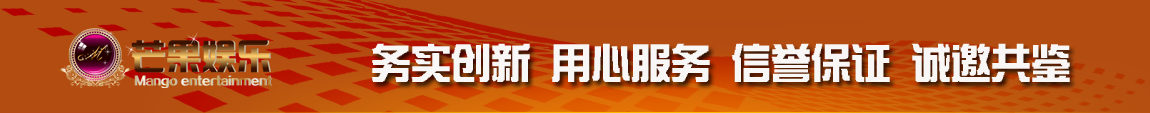
<style>
.page{position:relative;width:1150px;height:113px;background:#b34c11}
.page>*{position:absolute;margin:0}
.t1{font:40px "ÎÄ¶¦ÐÂÒÕÌå¼ò-Regular";color:#f9f6f6}
</style>
<div class="page">
<p class="t1" style="left:371px;top:43px;width:699px;height:39px">务实创新 用心服务 信誉保证 诚邀共鉴</p>
</div>
